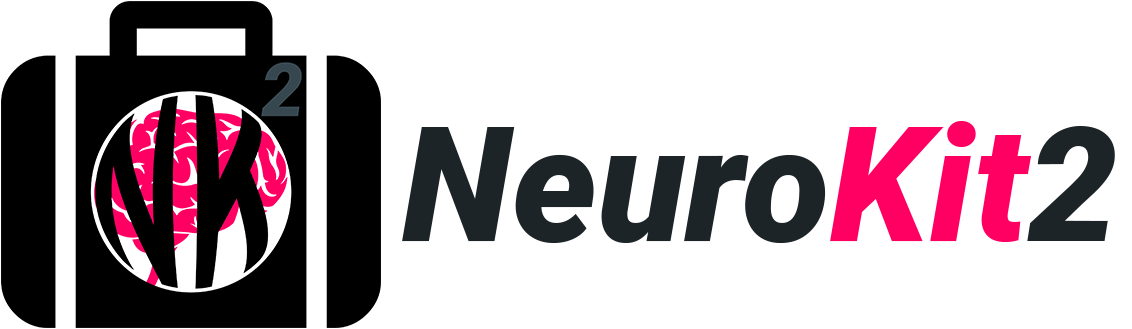
<style>
.page{position:relative;width:1132px;height:329px;background:#ffffff}
.page>*{position:absolute;margin:0}
.t1{font:160px "Roboto-BlackItalic";color:#1c2428}
.t2{font:160px "Roboto-BlackItalic";color:#ff0062}
</style>
<div class="page">
<p class="t1" style="left:402px;top:121px;width:713px;height:122px">Neuro<span class="t2">Kit</span>2</p>
</div>
